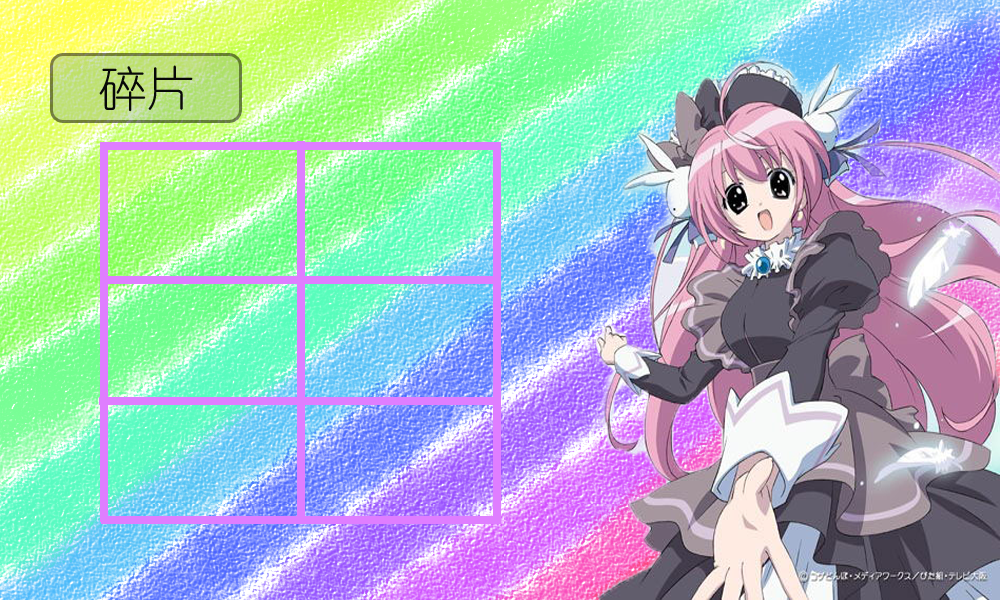
<style>
.page{position:relative;width:1000px;height:600px}
.page>*{position:absolute;margin:0}
.t1{font:48px "YouYuan";color:#080808}
</style>
<div class="page">
<p class="t1" style="left:99px;top:65px;width:94px;height:47px">碎片</p>
</div>
